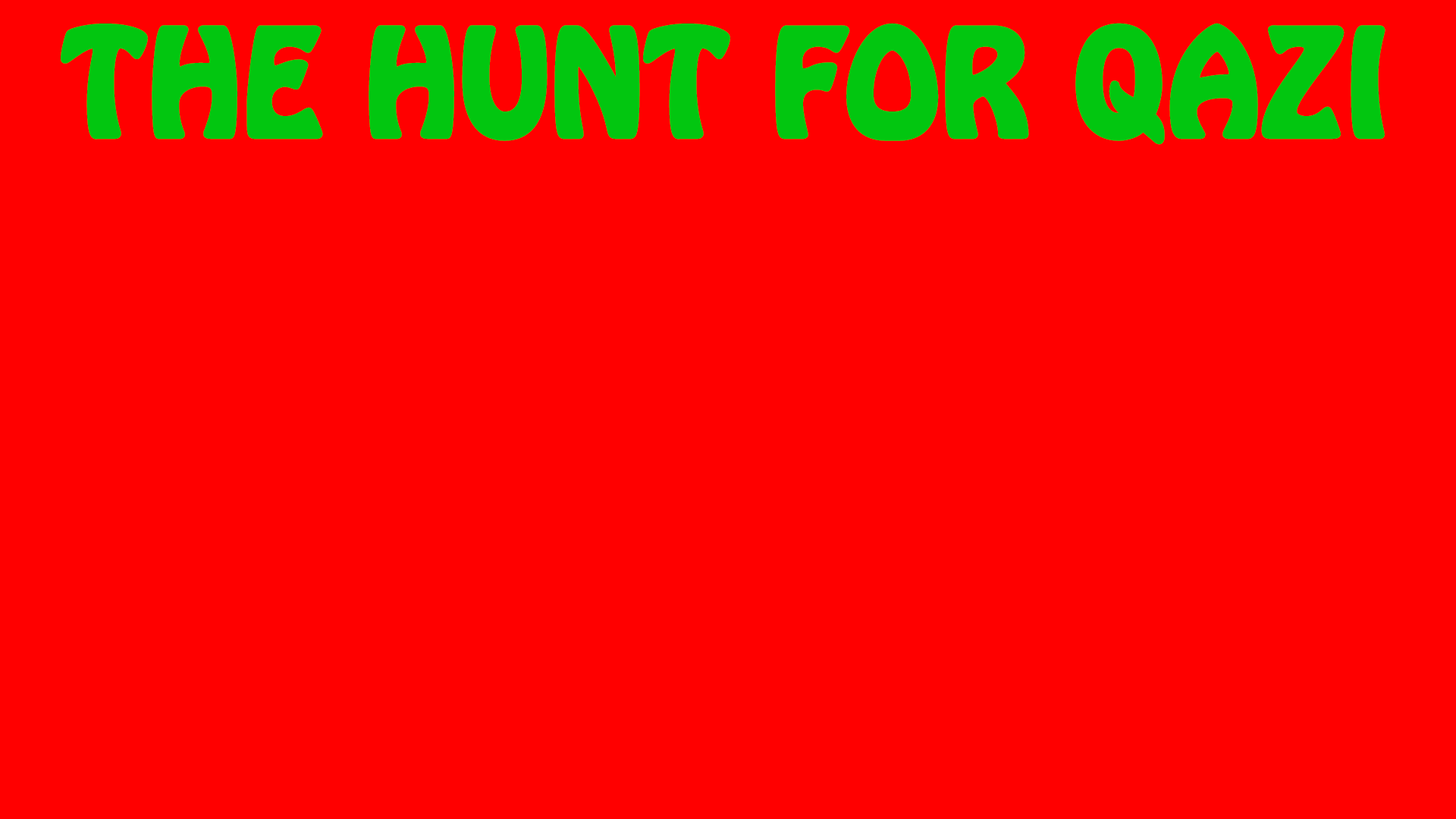
<style>
.page{position:relative;width:1456px;height:819px;background:#ff0000}
.page>*{position:absolute;margin:0}
.t1{font:129px "HoboStd";color:#02c610;font-weight:bold}
</style>
<div class="page">
<p class="t1" style="left:61px;top:23px;width:1324px;height:122px">THE HUNT FOR QAZI</p>
</div>
